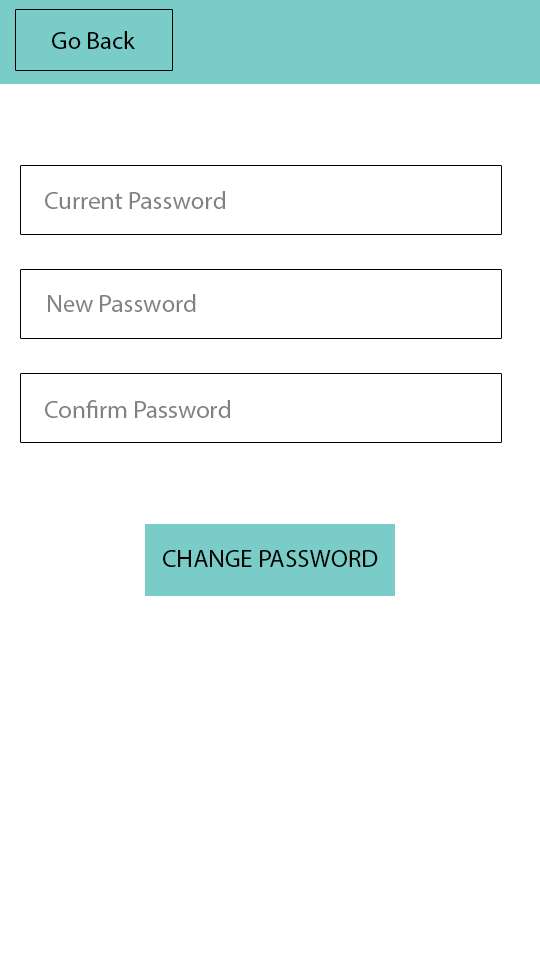
<style>
.page{position:relative;width:540px;height:960px;background:#ffffff}
.page>*{position:absolute;margin:0}
.t1{font:25px "MyriadPro-Regular";color:#000000}
.t2{font:25px "MyriadPro-Regular";color:#818181}
</style>
<div class="page">
<p class="t1" style="left:52px;top:31px;width:83px;height:18px">Go Back</p>
<p class="t2" style="left:45px;top:191px;width:180px;height:18px">Current Password</p>
<p class="t2" style="left:48px;top:294px;width:148px;height:18px">New Password</p>
<p class="t2" style="left:45px;top:400px;width:185px;height:18px">Confirm Password</p>
<p class="t1" style="left:163px;top:550px;width:215px;height:17px">CHANGE PASSWORD</p>
</div>
